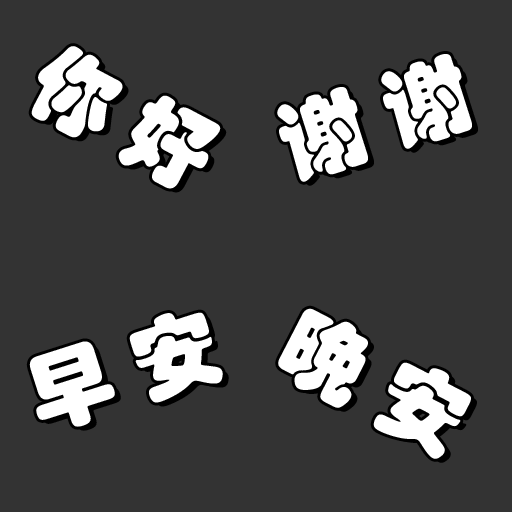
<style>
.page{position:relative;width:512px;height:512px;background:#333333}
.page>*{position:absolute;margin:0}
.t1{font:87.5px "STHupo";color:#ffffff}
</style>
<div class="page">
<p class="t1" style="left:31px;top:46px;width:190px;height:143px;rotate:28deg">你 好</p>
<p class="t1" style="left:277px;top:54px;width:195px;height:128px;rotate:-18deg">谢 谢</p>
<p class="t1" style="left:29px;top:312px;width:194px;height:115px;rotate:-18deg">早 安</p>
<p class="t1" style="left:278px;top:308px;width:193px;height:151px;rotate:27deg">晚 安</p>
</div>
